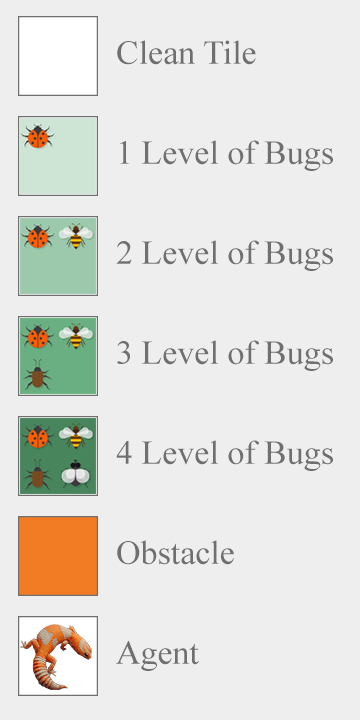
<style>
.page{position:relative;width:360px;height:720px;background:#eeeeee}
.page>*{position:absolute;margin:0}
.t1{font:33.4px "TimesNewRomanPSMT";color:#6f6f6f}
</style>
<div class="page">
<p class="t1" style="left:117px;top:40px;width:139px;height:25px">Clean Tile</p>
<p class="t1" style="left:120px;top:140px;width:213px;height:31px">1 Level of Bugs</p>
<p class="t1" style="left:116px;top:240px;width:217px;height:31px">2 Level of Bugs</p>
<p class="t1" style="left:117px;top:340px;width:216px;height:31px">3 Level of Bugs</p>
<p class="t1" style="left:116px;top:440px;width:217px;height:31px">4 Level of Bugs</p>
<p class="t1" style="left:117px;top:540px;width:117px;height:25px">Obstacle</p>
<p class="t1" style="left:116px;top:641px;width:83px;height:30px">Agent</p>
</div>
